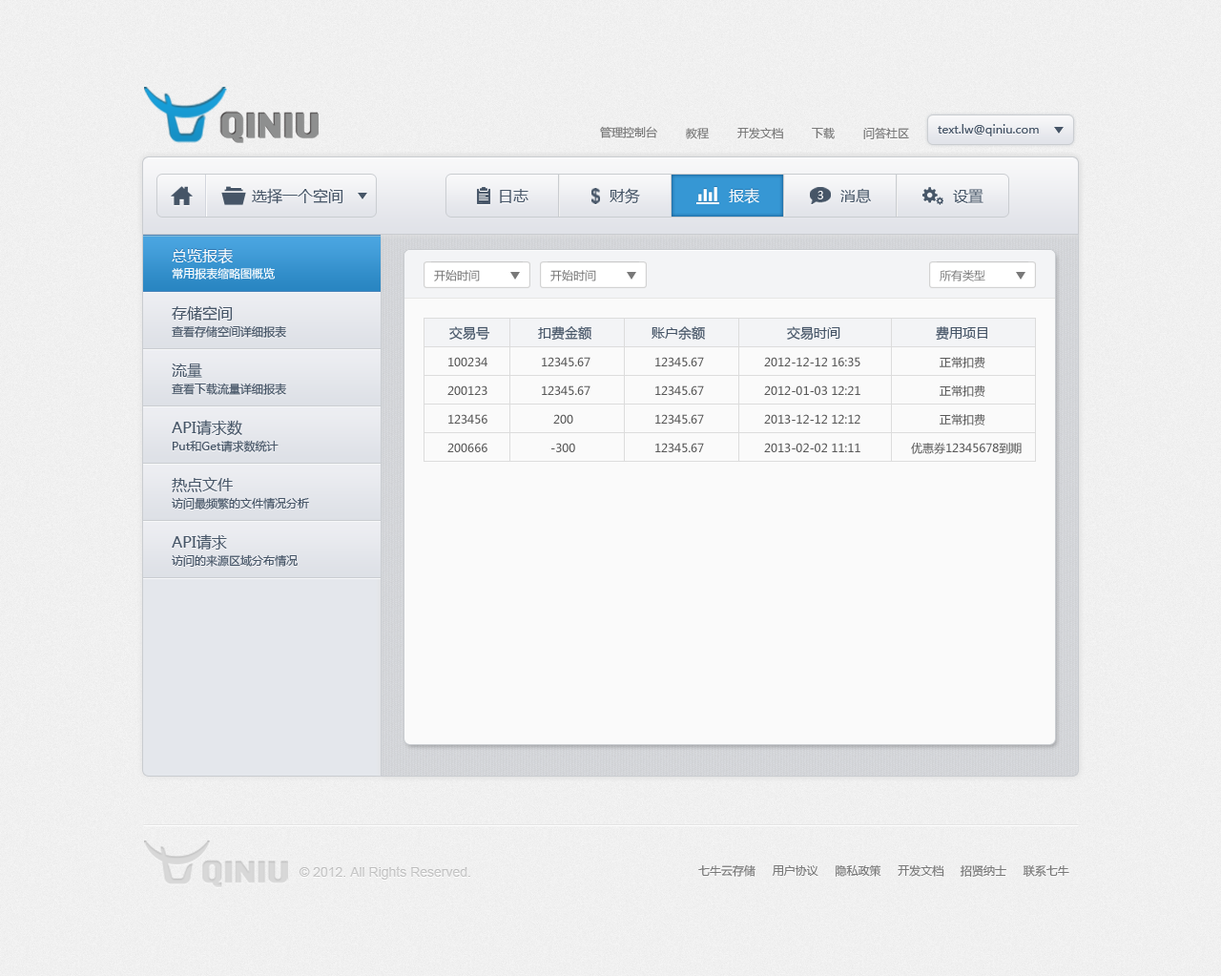
<style>
.page{position:relative;width:1221px;height:976px}
.page>*{position:absolute;margin:0}
.t1{font:11.5px "MicrosoftYaHei";color:#787878}
.t2{font:11.5px "MicrosoftYaHei";color:#465567}
.t3{font:15.3px "MicrosoftYaHei";color:#465567}
.t4{font:15.3px "MicrosoftYaHei";color:#ffffff}
.t5{font:11.5px "MicrosoftYaHei";color:#f8f8f9}
.t6{font:11.5px "MicrosoftYaHei";color:#ffffff}
.t7{font:13.4px "MicrosoftYaHei";color:#465567}
.t8{font:11.5px "MicrosoftYaHei";color:#585858}
.t9{font:13.4px "ArialMT";color:#c6c6c6}
</style>
<div class="page">
<p class="t1" style="left:600px;top:126px;width:57px;height:12px">管理控制台</p>
<p class="t2" style="left:938px;top:124px;width:101px;height:12px">text.lw@qiniu.com</p>
<p class="t1" style="left:686px;top:128px;width:24px;height:11px">教程</p>
<p class="t1" style="left:738px;top:127px;width:45px;height:12px">开发文档</p>
<p class="t1" style="left:812px;top:127px;width:23px;height:12px">下载</p>
<p class="t1" style="left:864px;top:127px;width:45px;height:12px">问答社区</p>
<p class="t3" style="left:252px;top:188px;width:92px;height:16px">选择一个空间</p>
<p class="t3" style="left:500px;top:189px;width:29px;height:14px">日志</p>
<p class="t3" style="left:610px;top:188px;width:30px;height:16px">财务</p>
<p class="t4" style="left:729px;top:188px;width:31px;height:16px">报表</p>
<p class="t5" style="left:818px;top:191px;width:6px;height:8px">3</p>
<p class="t3" style="left:841px;top:188px;width:30px;height:15px">消息</p>
<p class="t3" style="left:953px;top:189px;width:31px;height:14px">设置</p>
<p class="t4" style="left:172px;top:248px;width:61px;height:16px">总览报表</p>
<p class="t6" style="left:172px;top:267px;width:104px;height:13px">常用报表缩略图概览</p>
<p class="t1" style="left:434px;top:270px;width:46px;height:12px">开始时间</p>
<p class="t1" style="left:551px;top:270px;width:45px;height:12px">开始时间</p>
<p class="t1" style="left:940px;top:270px;width:46px;height:12px">所有类型</p>
<p class="t3" style="left:172px;top:305px;width:61px;height:16px">存储空间</p>
<p class="t2" style="left:172px;top:325px;width:114px;height:13px">查看存储空间详细报表</p>
<p class="t7" style="left:449px;top:326px;width:41px;height:14px">交易号</p>
<p class="t7" style="left:538px;top:326px;width:54px;height:15px">扣费金额</p>
<p class="t7" style="left:652px;top:326px;width:53px;height:14px">账户余额</p>
<p class="t7" style="left:787px;top:326px;width:54px;height:14px">交易时间</p>
<p class="t7" style="left:936px;top:326px;width:52px;height:15px">费用项目</p>
<p class="t3" style="left:172px;top:364px;width:30px;height:14px">流量</p>
<p class="t8" style="left:449px;top:357px;width:39px;height:9px">100234</p>
<p class="t8" style="left:542px;top:357px;width:49px;height:9px">12345.67</p>
<p class="t8" style="left:656px;top:357px;width:48px;height:9px">12345.67</p>
<p class="t8" style="left:764px;top:357px;width:97px;height:9px">2012-12-12 16:35</p>
<p class="t8" style="left:940px;top:357px;width:46px;height:11px">正常扣费</p>
<p class="t2" style="left:172px;top:383px;width:114px;height:12px">查看下载流量详细报表</p>
<p class="t8" style="left:448px;top:386px;width:40px;height:9px">200123</p>
<p class="t8" style="left:542px;top:386px;width:49px;height:9px">12345.67</p>
<p class="t8" style="left:656px;top:386px;width:48px;height:9px">12345.67</p>
<p class="t8" style="left:764px;top:386px;width:97px;height:9px">2012-01-03 12:21</p>
<p class="t8" style="left:940px;top:386px;width:46px;height:11px">正常扣费</p>
<p class="t3" style="left:172px;top:420px;width:70px;height:16px">API请求数</p>
<p class="t8" style="left:449px;top:414px;width:39px;height:10px">123456</p>
<p class="t8" style="left:553px;top:414px;width:21px;height:10px">200</p>
<p class="t8" style="left:656px;top:414px;width:48px;height:10px">12345.67</p>
<p class="t8" style="left:764px;top:414px;width:97px;height:10px">2013-12-12 12:12</p>
<p class="t8" style="left:940px;top:414px;width:46px;height:12px">正常扣费</p>
<p class="t2" style="left:173px;top:440px;width:106px;height:12px">Put和Get请求数统计</p>
<p class="t8" style="left:448px;top:443px;width:40px;height:9px">200666</p>
<p class="t8" style="left:552px;top:443px;width:23px;height:9px">-300</p>
<p class="t8" style="left:656px;top:443px;width:48px;height:9px">12345.67</p>
<p class="t8" style="left:764px;top:443px;width:97px;height:9px">2013-02-02 11:11</p>
<p class="t8" style="left:911px;top:443px;width:111px;height:11px">优惠券12345678到期</p>
<p class="t3" style="left:172px;top:477px;width:61px;height:15px">热点文件</p>
<p class="t2" style="left:172px;top:497px;width:137px;height:13px">访问最频繁的文件情况分析</p>
<p class="t3" style="left:172px;top:534px;width:55px;height:16px">API请求</p>
<p class="t2" style="left:172px;top:554px;width:126px;height:13px">访问的来源区域分布情况</p>
<p class="t9" style="left:299px;top:866px;width:171px;height:14px">© 2012. All Rights Reserved.</p>
<p class="t1" style="left:699px;top:865px;width:371px;height:12px">七牛云存储     用户协议     隐私政策     开发文档     招贤纳士     联系七牛</p>
</div>
